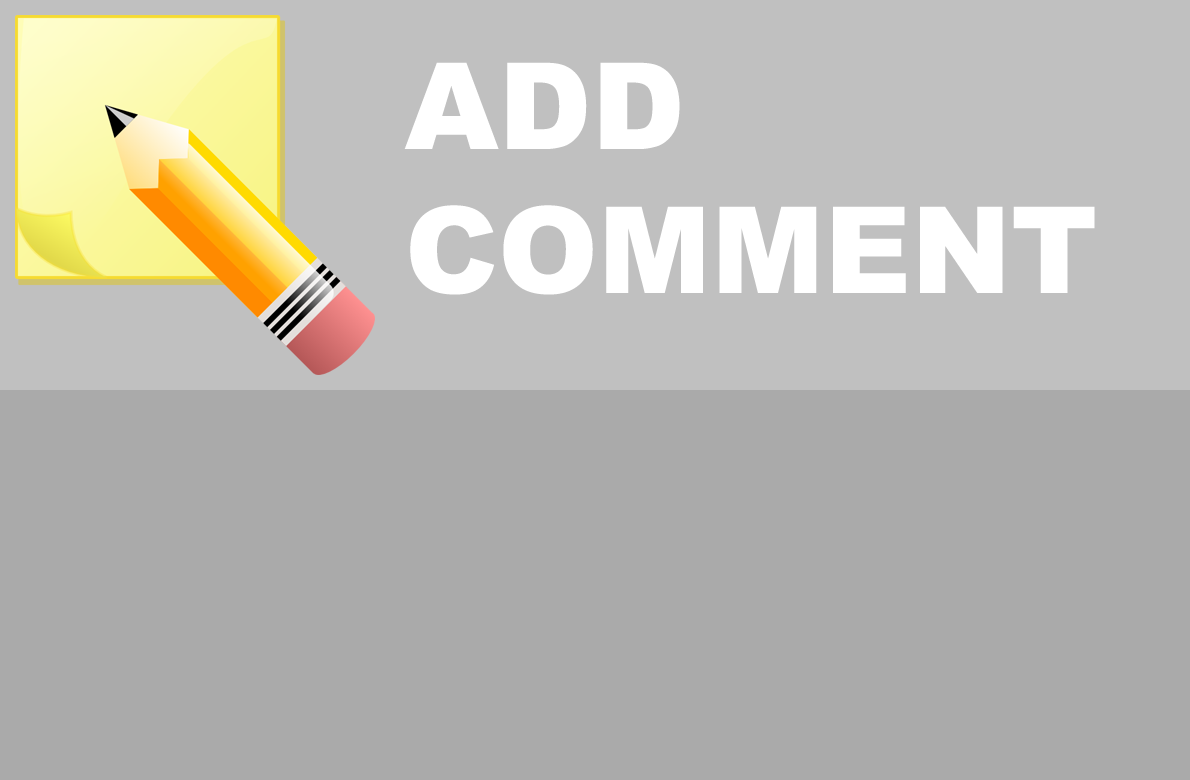
<style>
.page{position:relative;width:1190px;height:780px;background:#aaaaaa}
.page>*{position:absolute;margin:0}
.t1{font:120px "Arial-Black";color:#ffffff}
</style>
<div class="page">
<p class="t1" style="left:404px;top:62px;width:691px;height:233px">ADD<br>COMMENT</p>
</div>
